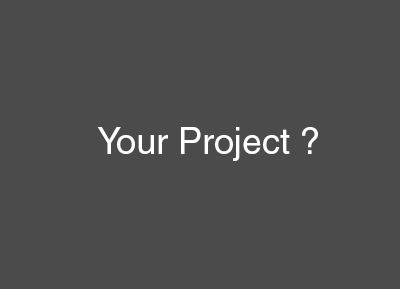
<style>
.page{position:relative;width:400px;height:289px;background:#4b4b4b}
.page>*{position:absolute;margin:0}
.t1{font:36px "Helvetica";color:#ffffff}
</style>
<div class="page">
<p class="t1" style="left:97px;top:127px;width:221px;height:34px">Your Project ?</p>
</div>
